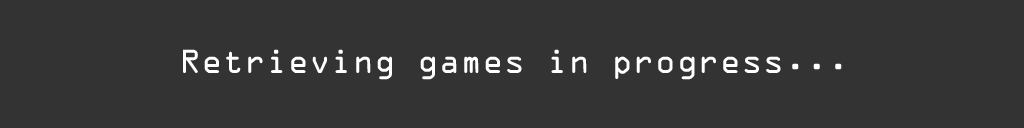
<style>
.page{position:relative;width:1024px;height:128px;background:#333333}
.page>*{position:absolute;margin:0}
.t1{font:30px "OCRAStd";color:#ffffff}
</style>
<div class="page">
<p class="t1" style="left:183px;top:49px;width:659px;height:31px">Retrieving games in progress...</p>
</div>
